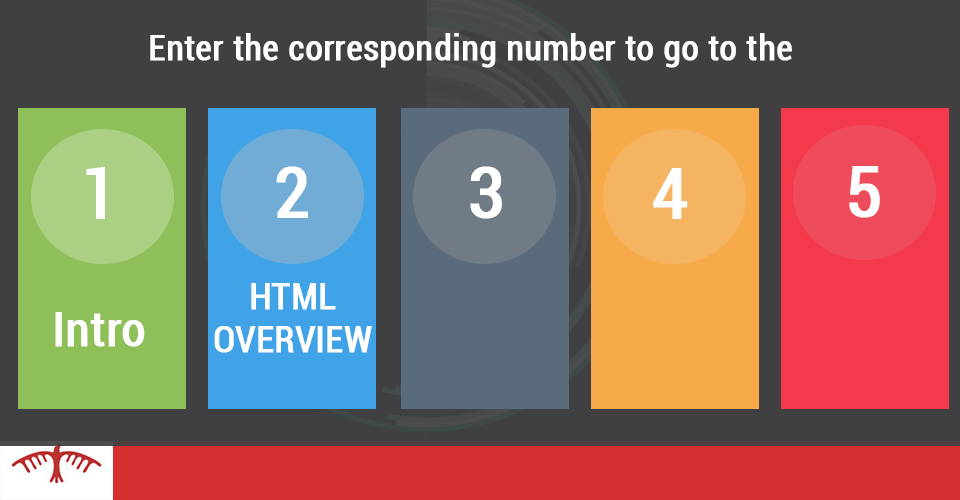
<style>
.page{position:relative;width:960px;height:500px;background:#404042}
.page>*{position:absolute;margin:0}
.t1{font:35px "Roboto-Condensed";color:#ffffff;font-weight:bold}
.t2{font:70px "Roboto-Condensed";color:#ffffff;font-weight:bold}
.t3{font:36px "Roboto-Condensed";color:#ffffff;font-weight:bold}
.t4{font:48px "Roboto-Condensed";color:#ffffff;font-weight:bold}
</style>
<div class="page">
<p class="t1" style="left:150px;top:33px;width:642px;height:35px">Enter the corresponding number to go to the notes</p>
<p class="t2" style="left:86px;top:167px;width:19px;height:52px">1</p>
<p class="t2" style="left:276px;top:166px;width:32px;height:52px">2</p>
<p class="t2" style="left:470px;top:166px;width:32px;height:53px">3</p>
<p class="t2" style="left:653px;top:168px;width:35px;height:51px">4</p>
<p class="t2" style="left:849px;top:166px;width:31px;height:52px">5</p>
<p class="t3" style="left:214px;top:283px;width:158px;height:70px;text-align:center">HTML<br>OVERVIEW</p>
<p class="t4" style="left:55px;top:312px;width:90px;height:35px">Intro</p>
</div>
